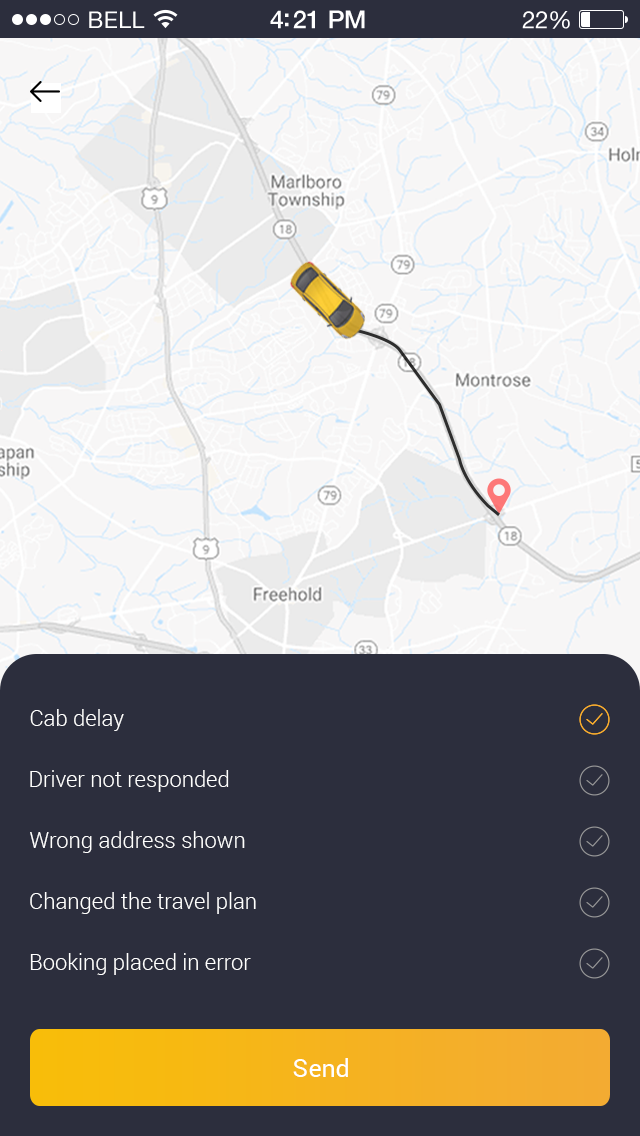
<style>
.page{position:relative;width:640px;height:1136px;background:#2c2e3d}
.page>*{position:absolute;margin:0}
.t1{font:22px "Roboto-Light";color:#ffffff}
.t2{font:25px "Roboto-Regular";color:#ffffff}
</style>
<div class="page">
<p class="t1" style="left:30px;top:709px;width:94px;height:22px">Cab delay</p>
<p class="t1" style="left:30px;top:770px;width:199px;height:22px">Driver not responded</p>
<p class="t1" style="left:30px;top:831px;width:215px;height:22px">Wrong address shown</p>
<p class="t1" style="left:30px;top:892px;width:226px;height:22px">Changed the travel plan</p>
<p class="t1" style="left:30px;top:953px;width:221px;height:22px">Booking placed in error</p>
<p class="t2" style="left:293px;top:1058px;width:55px;height:19px">Send</p>
</div>
